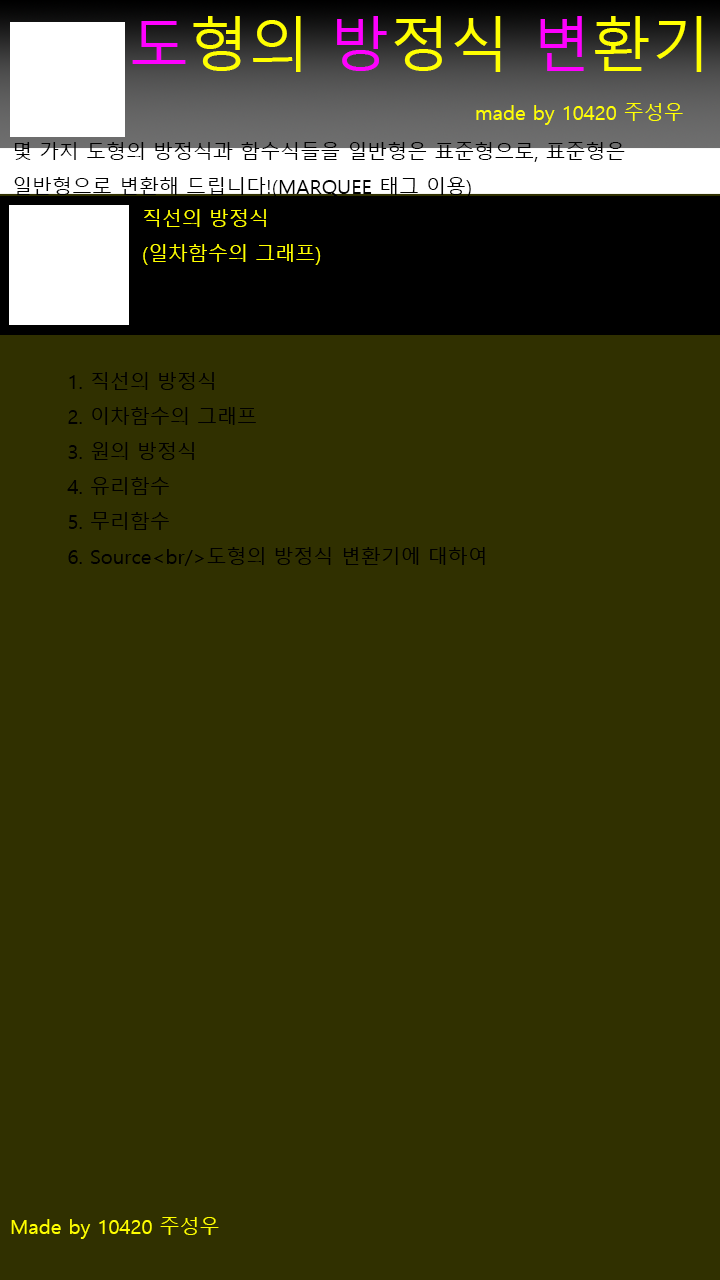
<style>
.page{position:relative;width:720px;height:1280px;background:#303000}
.page>*{position:absolute;margin:0}
.t1{font:60px "MalgunGothic";color:#ffff00}
.t2{font:60px "MalgunGothic";color:#ff00ff}
.t3{font:20px "MalgunGothic";color:#ffff00}
.t4{font:20px "MalgunGothic";color:#000000}
</style>
<div class="page">
<p class="t1" style="left:132px;top:16px;width:570px;height:56px"><span class="t2">도</span>형의 <span class="t2">방</span>정식 <span class="t2">변</span>환기</p>
<p class="t3" style="left:476px;top:103px;width:207px;height:22px">made by 10420 주성우</p>
<p class="t4" style="left:14px;top:142px;width:611px;height:56px">몇 가지 도형의 방정식과 함수식들을 일반형은 표준형으로, 표준형은 일반형으로 변환해 드립니다!(MARQUEE 태그 이용)</p>
<p class="t3" style="left:143px;top:209px;width:178px;height:56px">직선의 방정식<br>(일차함수의 그래프)</p>
<p class="t4" style="left:67px;top:372px;width:418px;height:194px">1. 직선의 방정식<br>2. 이차함수의 그래프<br>3. 원의 방정식<br>4. 유리함수<br>5. 무리함수<br>6. Source&lt;br/&gt;도형의 방정식 변환기에 대하여</p>
<p class="t3" style="left:11px;top:1217px;width:208px;height:22px">Made by 10420 주성우</p>
</div>
